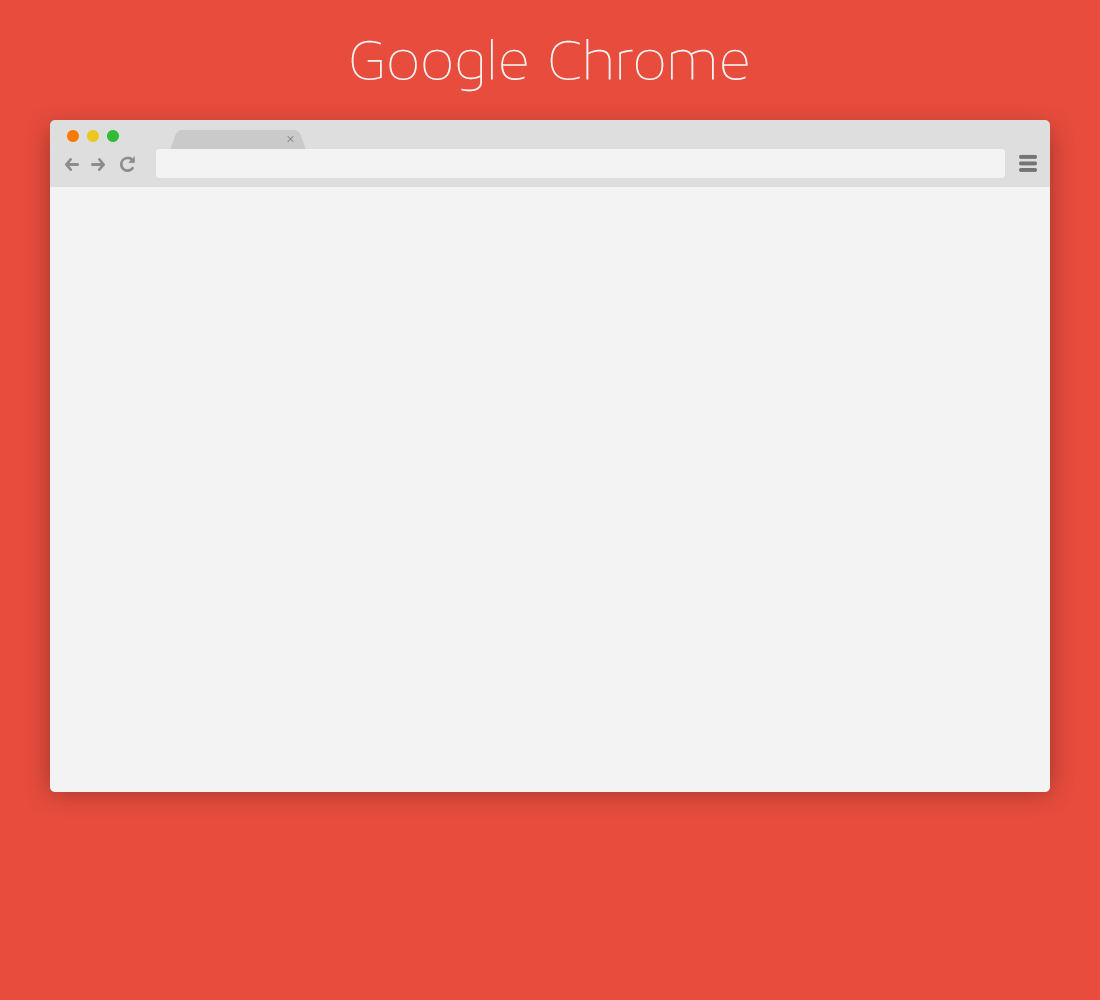
<style>
.page{position:relative;width:1100px;height:1000px;background:#f3f3f3}
.page>*{position:absolute;margin:0}
.t1{font:61.8px "MavenProLight200-Regular";color:#f3f3f3}
.t2{font:23.2px "MavenProLight200-Regular"}
</style>
<div class="page">
<p class="t1" style="left:351px;top:39px;width:397px;height:53px">Google Chrome</p>
<p class="t2" style="left:287px;top:136px;width:7px;height:6px;rotate:-45deg">+</p>
</div>
